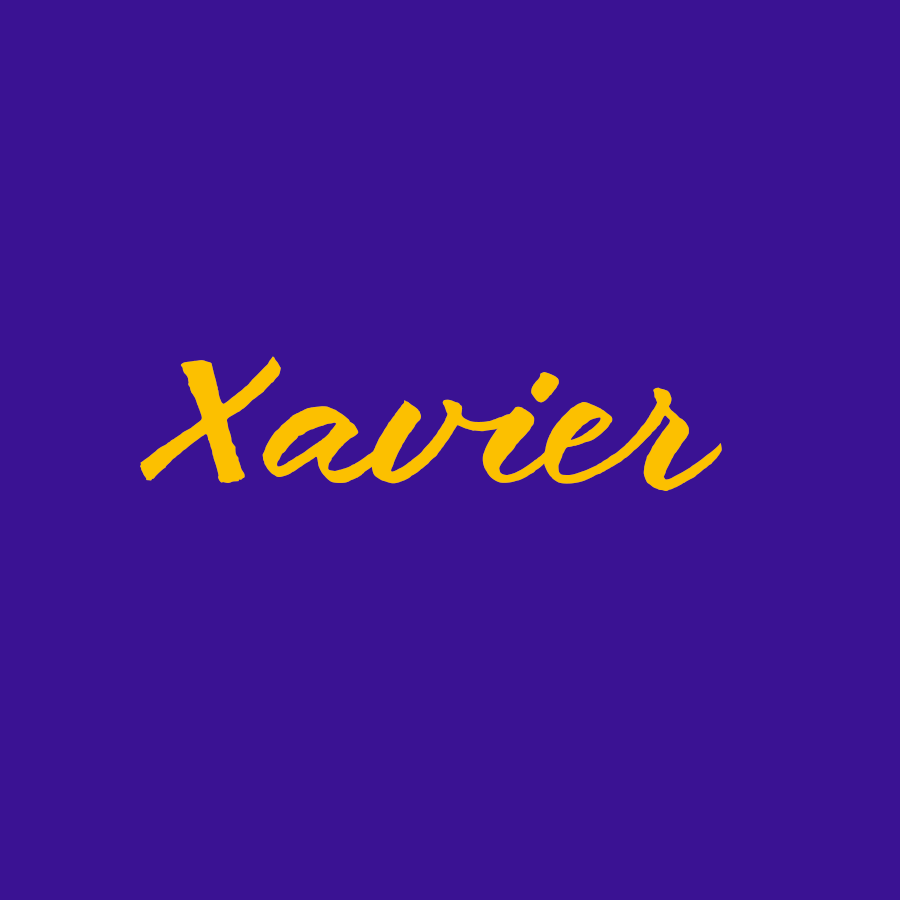
<style>
.page{position:relative;width:900px;height:900px;background:#3a1293}
.page>*{position:absolute;margin:0}
.t1{font:188.9px "Brushland-Regular";color:#fcc000;scale:1.06 1}
</style>
<div class="page">
<p class="t1" style="left:140px;top:356px;width:582px;height:135px">Xavier</p>
</div>
